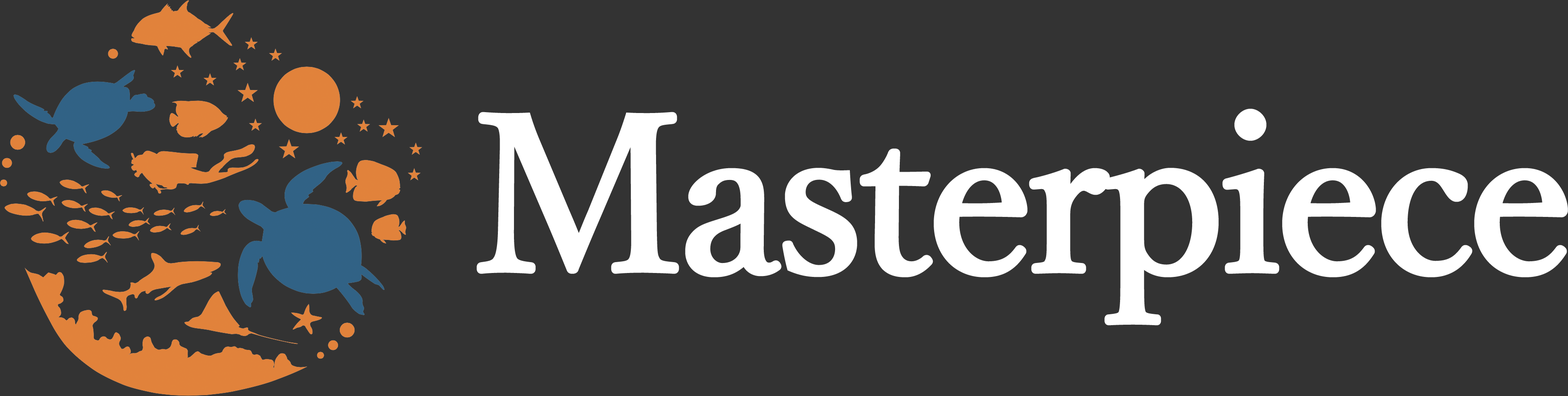
<style>
.page{position:relative;width:1568px;height:396px;background:#333333}
.page>*{position:absolute;margin:0}
.t1{font:217.2px "YuMin-Medium";letter-spacing:-0.05em;color:#ffffff;font-weight:bold}
</style>
<div class="page">
<p class="t1" style="left:477px;top:109px;width:1091px;height:216px">Masterpiece</p>
</div>
